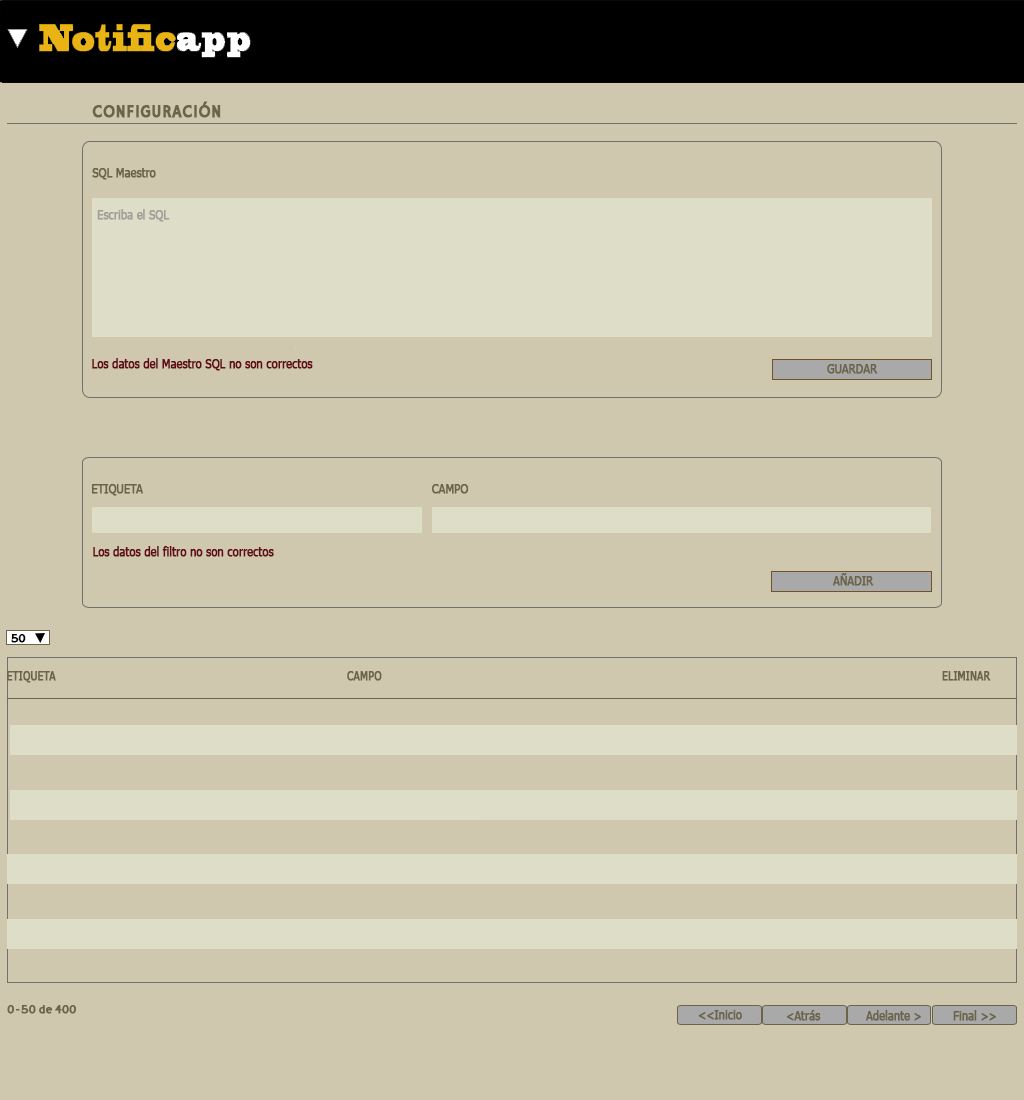
<style>
.page{position:relative;width:1024px;height:1100px;background:#cfc8af}
.page>*{position:absolute;margin:0}
.t1{font:18px "HammersmithOne";color:#6c644a;font-weight:bold;scale:0.9 1}
.t2{font:12px "Tahoma";color:#6c644a;font-weight:bold;scale:0.9 1}
.t3{font:12px "Tahoma";color:#9f9f99;font-weight:bold;scale:0.9 1}
.t4{font:12px "Tahoma";color:#620c18;font-weight:bold;scale:0.9 1}
.t5{font:12px "HammersmithOne";color:#000000;font-weight:bold;scale:0.9 1}
.t6{font:12px "Tahoma";color:#6c644a;font-weight:bold;scale:0.86 1}
.t7{font:12px "HammersmithOne";color:#6c644a;font-weight:bold;scale:0.9 1}
</style>
<div class="page">
<p class="t1" style="left:92px;top:101px;width:129px;height:17px">CONFIGURACIÓN</p>
<p class="t2" style="left:92px;top:168px;width:64px;height:12px">SQL Maestro</p>
<p class="t3" style="left:97px;top:209px;width:73px;height:13px">Escriba el SQL</p>
<p class="t4" style="left:92px;top:358px;width:221px;height:13px">Los datos del Maestro SQL no son correctos</p>
<p class="t2" style="left:827px;top:364px;width:51px;height:10px">GUARDAR</p>
<p class="t2" style="left:92px;top:484px;width:51px;height:12px">ETIQUETA</p>
<p class="t2" style="left:432px;top:484px;width:37px;height:10px">CAMPO</p>
<p class="t4" style="left:93px;top:546px;width:181px;height:11px">Los datos del filtro no son correctos</p>
<p class="t2" style="left:833px;top:573px;width:41px;height:13px">AÑADIR</p>
<p class="t5" style="left:11px;top:634px;width:15px;height:9px">50</p>
<p class="t6" style="left:7px;top:671px;width:49px;height:12px">ETIQUETA</p>
<p class="t6" style="left:347px;top:671px;width:35px;height:10px">CAMPO</p>
<p class="t6" style="left:942px;top:671px;width:49px;height:10px">ELIMINAR</p>
<p class="t7" style="left:7px;top:1005px;width:70px;height:9px">0-50 de 400</p>
<p class="t2" style="left:698px;top:1010px;width:44px;height:10px">&lt;&lt;Inicio</p>
<p class="t2" style="left:786px;top:1010px;width:35px;height:11px">&lt;Atrás</p>
<p class="t2" style="left:866px;top:1010px;width:55px;height:11px">Adelante &gt;</p>
<p class="t2" style="left:953px;top:1010px;width:43px;height:11px">Final &gt;&gt;</p>
</div>
